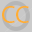
<style>
.page{position:relative;width:32px;height:32px;background:#cbcbcb}
.page>*{position:absolute;margin:0}
.t1{font:25px "MyriadPro-Regular";color:#ffae33}
</style>
<div class="page">
<p class="t1" style="left:2px;top:6px;width:27px;height:17px">CC</p>
</div>
